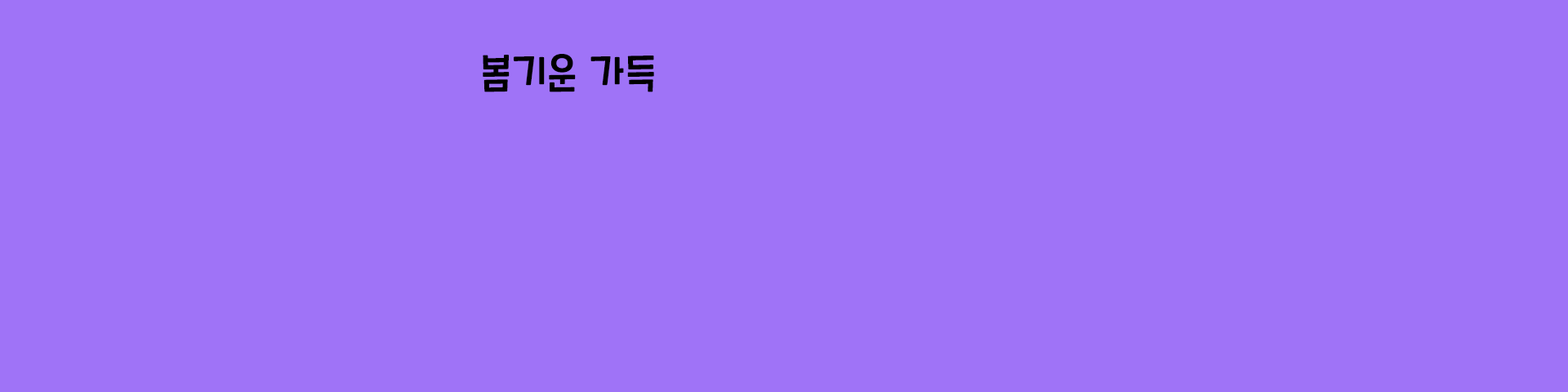
<style>
.page{position:relative;width:1568px;height:392px;background:#9f73f7}
.page>*{position:absolute;margin:0}
.t1{font:39.2px "CookieRunOTF-Regular";color:#000000}
</style>
<div class="page">
<p class="t1" style="left:483px;top:54px;width:171px;height:38px">봄기운 가득</p>
</div>
